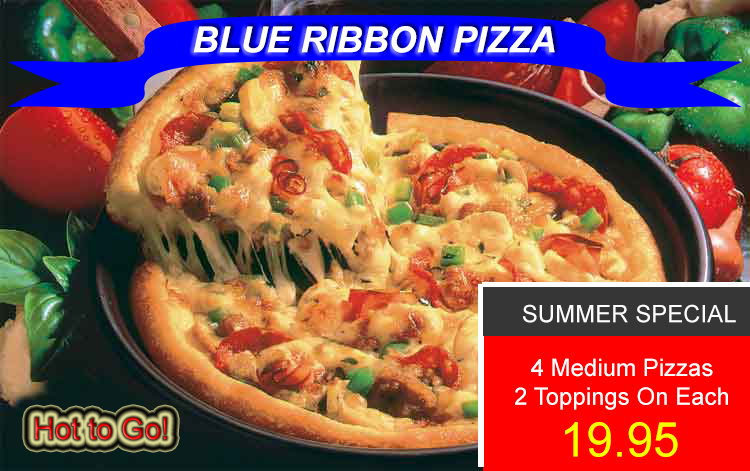
<style>
.page{position:relative;width:750px;height:471px}
.page>*{position:absolute;margin:0}
.t1{font:36px "Arial-BoldItalicMT";color:#ffffff}
.t2{font:24px "ArialMT";color:#ffffff}
.t3{font:30px "ArialMT"}
.t4{font:48px "ArialMT";color:#f6ff00}
</style>
<div class="page">
<p class="t1" style="left:193px;top:26px;width:362px;height:27px">BLUE RIBBON PIZZA</p>
<p class="t2" style="left:523px;top:304px;width:213px;height:19px">SUMMER SPECIAL</p>
<p class="t2" style="left:515px;top:358px;width:213px;height:52px;text-align:center">4 Medium Pizzas<br>2 Toppings On Each</p>
<p class="t3" style="left:35px;top:417px;width:132px;height:23px">Hot to Go!</p>
<p class="t4" style="left:565px;top:422px;width:113px;height:35px">19.95</p>
</div>
